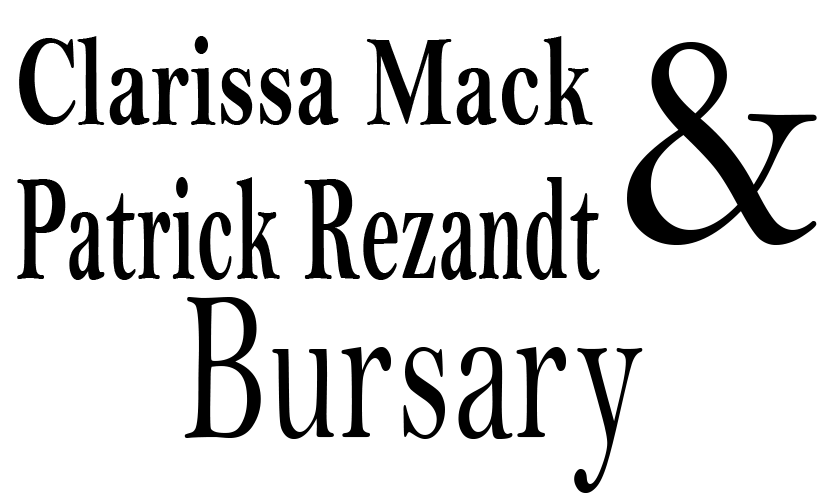
<style>
.page{position:relative;width:823px;height:500px;background:#ffffff}
.page>*{position:absolute;margin:0}
.t1{font:131.6px "BellMTBold";color:#000000;scale:0.71 1}
.t2{font:315.5px "BellMT";color:#000000;scale:0.97 1}
.t3{font:153.2px "BellMTBold";color:#000000;scale:0.54 1}
.t4{font:214.9px "BellMT";color:#000000;scale:0.66 1}
</style>
<div class="page">
<p class="t1" style="left:19px;top:36px;width:574px;height:89px">Clarissa Mack</p>
<p class="t2" style="left:627px;top:42px;width:190px;height:203px">&amp;</p>
<p class="t3" style="left:17px;top:177px;width:583px;height:103px">Patrick Rezandt</p>
<p class="t4" style="left:184px;top:297px;width:459px;height:196px">Bursary</p>
</div>
